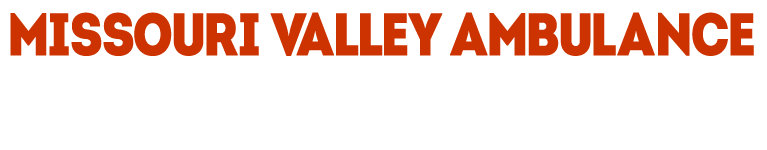
<style>
.page{position:relative;width:767px;height:150px;background:#ffffff}
.page>*{position:absolute;margin:0}
.t1{font:60px "IntroCondBlackFree";color:#cc3300}
</style>
<div class="page">
<p class="t1" style="left:10px;top:12px;width:744px;height:44px">missouri valley ambulance</p>
</div>
